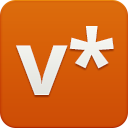
<style>
.page{position:relative;width:128px;height:128px}
.page>*{position:absolute;margin:0}
.t1{font:90.8px "OpenSans-Bold";color:#f6f7f2}
</style>
<div class="page">
<p class="t1" style="left:16px;top:26px;width:98px;height:69px">v*</p>
</div>
